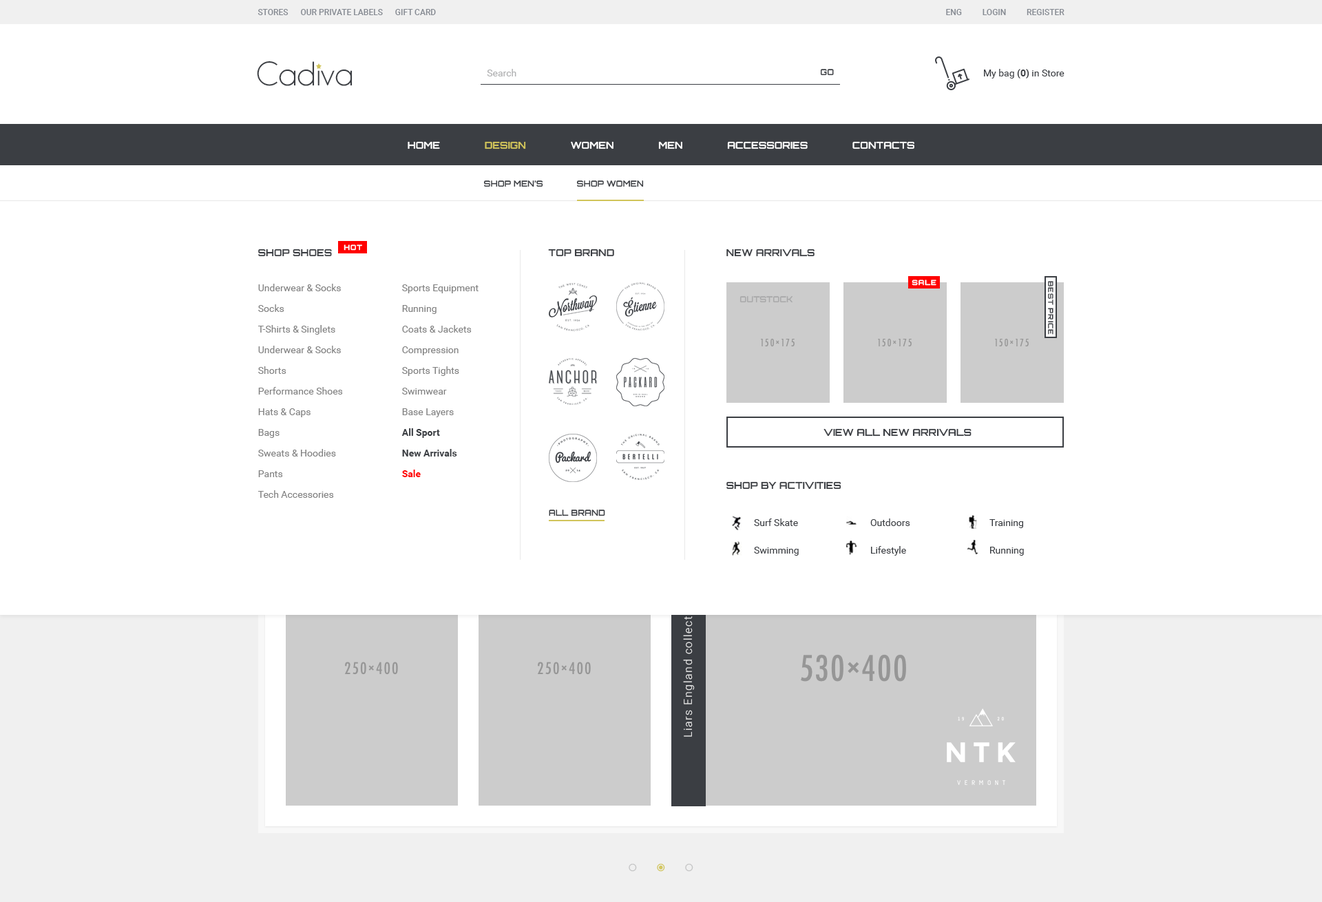
<style>
.page{position:relative;width:1322px;height:902px;background:#ffffff}
.page>*{position:absolute;margin:0}
.t1{font:8.3px "Roboto-Medium";color:#858a92;text-transform:uppercase}
.t2{font:34.4px "Champagne&Limousines";color:#3b3e43}
.t3{font:9.6px "Roboto-Regular";color:#afb0b1}
.t4{font:8.3px "Orbitron-Bold";color:#3b3e43;text-transform:uppercase}
.t5{font:9.6px "Roboto-Regular";color:#3b3e43}
.t6{font:9.6px "Roboto-Bold";color:#3b3e43}
.t7{font:9.6px "Orbitron-Bold";color:#ffffff;text-transform:uppercase}
.t8{font:9.6px "Orbitron-Bold";color:#d1c45a;text-transform:uppercase}
.t9{font:6.9px "Orbitron-Bold";letter-spacing:0.1em;color:#ffffff;text-transform:uppercase}
.t10{font:9.6px "Orbitron-Bold";color:#3b3e43;text-transform:uppercase}
.t11{font:6.9px "Orbitron-Bold";letter-spacing:0.1em;color:#3b3e43;text-transform:uppercase}
.t12{font:9.6px/20.7px "Roboto-Regular";color:#828282}
.t13{font:9.6px/20.7px "Roboto-Bold";color:#3b3e43}
.t14{font:9.6px/20.7px "Roboto-Bold";color:#ff0000}
.t15{font:8.3px "Orbitron-Bold";color:#a9a9aa;text-transform:uppercase}
.t16{font:9.6px "Orbitron-Bold";color:#3b3e43}
.t17{font:9.6px/27.5px "Roboto-Regular";color:#3b3e43}
.t18{font:11px "Roboto-Light";letter-spacing:0.1em;color:#f0f0f0}
</style>
<div class="page">
<p class="t1" style="left:258px;top:9px;width:178px;height:6px">Stores      Our Private Labels      Gift Card</p>
<p class="t1" style="left:946px;top:9px;width:118px;height:6px">Eng          login          register</p>
<p class="t2" style="left:257px;top:61px;width:96px;height:25px">Cadiva</p>
<p class="t3" style="left:487px;top:69px;width:29px;height:7px">Search</p>
<p class="t4" style="left:820px;top:69px;width:14px;height:7px">go</p>
<p class="t5" style="left:984px;top:69px;width:80px;height:9px">My bag <span class="t6">(0)</span> in Store</p>
<p class="t7" style="left:408px;top:141px;width:506px;height:8px">Home           <span class="t8">    Design  </span>             Women               Men               Accessories               Contacts</p>
<p class="t4" style="left:483px;top:180px;width:60px;height:7px">shop men’s</p>
<p class="t4" style="left:576px;top:180px;width:68px;height:7px">shop women</p>
<p class="t9" style="left:344px;top:244px;width:18px;height:7px">hot</p>
<p class="t10" style="left:258px;top:249px;width:74px;height:8px">shop shoes</p>
<p class="t10" style="left:548px;top:249px;width:66px;height:8px">top brand</p>
<p class="t10" style="left:726px;top:249px;width:89px;height:8px">new arrivals</p>
<p class="t9" style="left:912px;top:280px;width:24px;height:6px">sale</p>
<p class="t11" style="left:1048px;top:281px;width:5px;height:54px;rotate:90deg">best price</p>
<p class="t12" style="left:258px;top:284px;width:85px;height:214px">Underwear &amp; Socks <br>Socks <br>T-Shirts &amp; Singlets <br>Underwear &amp; Socks <br>Shorts <br>Performance Shoes <br>Hats &amp; Caps <br>Bags <br>Sweats &amp; Hoodies <br>Pants <br>Tech Accessories</p>
<p class="t12" style="left:401px;top:284px;width:78px;height:193px">Sports Equipment <br>Running <br>Coats &amp; Jackets <br>Compression <br>Sports Tights <br>Swimwear <br>Base Layers <br><span class="t13">All Sport <br>New Arrivals <br></span><span class="t14">Sale</span></p>
<p class="t15" style="left:739px;top:296px;width:54px;height:7px">outstock</p>
<p class="t16" style="left:823px;top:428px;width:149px;height:9px">VIEW ALL NEW ARRIVALS</p>
<p class="t10" style="left:726px;top:481px;width:115px;height:9px">shop by activities</p>
<p class="t4" style="left:549px;top:510px;width:56px;height:6px">All brand</p>
<p class="t17" style="left:754px;top:518px;width:45px;height:38px">Surf Skate<br>Swimming</p>
<p class="t17" style="left:870px;top:518px;width:40px;height:38px">Outdoors<br>Lifestyle</p>
<p class="t17" style="left:989px;top:519px;width:35px;height:37px">Training<br>Running</p>
<p class="t18" style="left:683px;top:600px;width:12px;height:137px;rotate:-90deg">Liars England collective</p>
</div>
